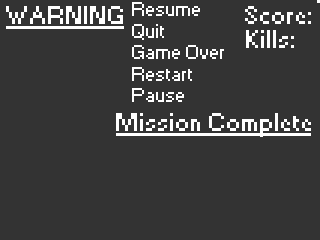
<style>
.page{position:relative;width:320px;height:240px;background:#333333}
.page>*{position:absolute;margin:0}
.t1{font:18px "Small Fonts";color:#ffffff}
.t2{font:24px "Small Fonts";color:#ffffff}
</style>
<div class="page">
<p class="t1" style="left:132px;top:2px;width:92px;height:100px">Resume<br>Quit<br>Game Over<br>Restart<br>Pause</p>
<p class="t2" style="left:246px;top:30px;width:48px;height:18px">Kills:</p>
</div>
